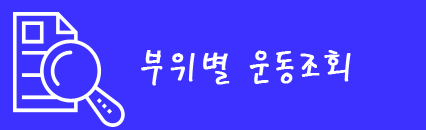
<style>
.page{position:relative;width:426px;height:130px;background:#3c31ff}
.page>*{position:absolute;margin:0}
.t1{font:37px "PyunjiR-HM";color:#ffffff;font-weight:bold;scale:0.97 1}
</style>
<div class="page">
<p class="t1" style="left:141px;top:50px;width:210px;height:36px">부위별 운동조회</p>
</div>
